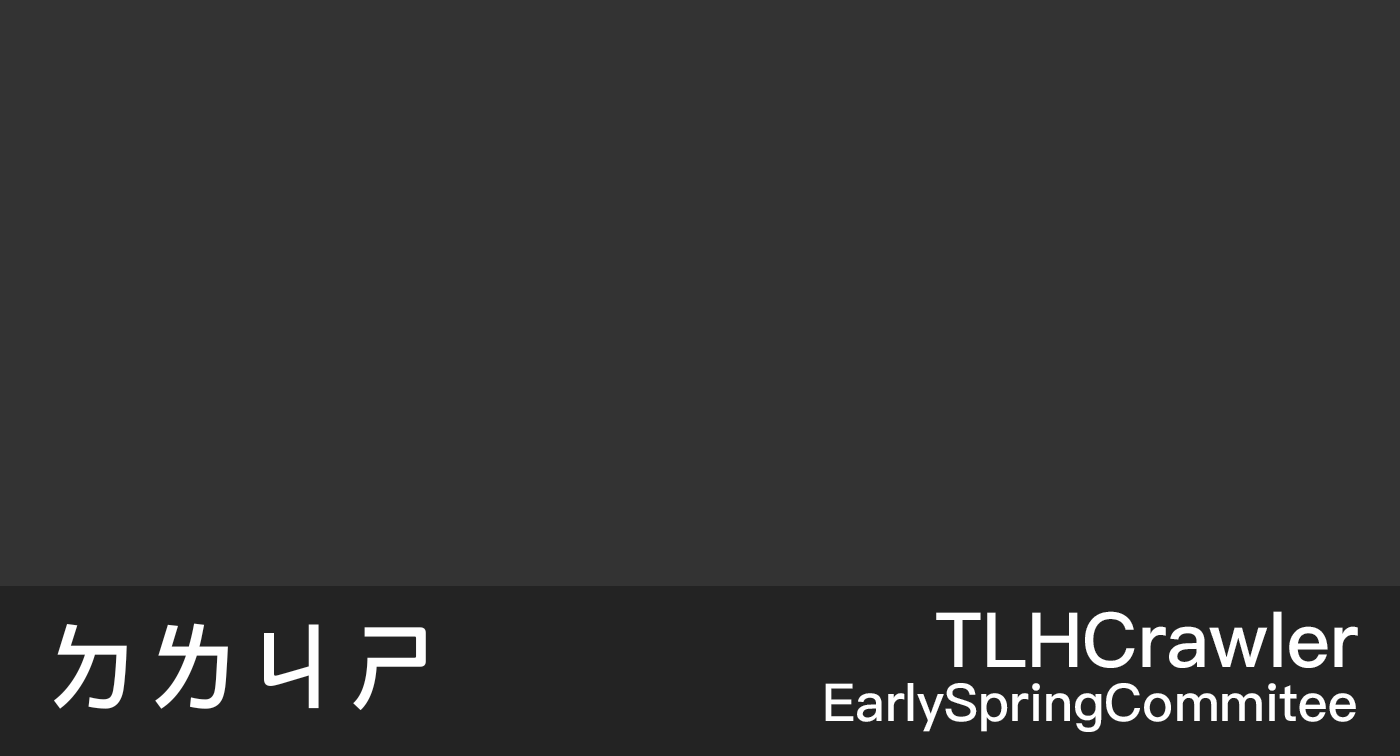
<style>
.page{position:relative;width:1400px;height:756px;background:#333333}
.page>*{position:absolute;margin:0}
.t1{font:75.9px "PingFangHK-Medium";color:#ffffff}
.t2{font:100.4px "PingFangHK-Medium";color:#ffffff}
.t3{font:52.2px "PingFangHK-Medium";color:#ffffff}
</style>
<div class="page">
<p class="t1" style="left:936px;top:611px;width:422px;height:57px">TLHCrawler</p>
<p class="t2" style="left:54px;top:623px;width:372px;height:88px">ㄉㄌㄐㄕ</p>
<p class="t3" style="left:825px;top:683px;width:531px;height:49px">EarlySpringCommitee</p>
</div>
